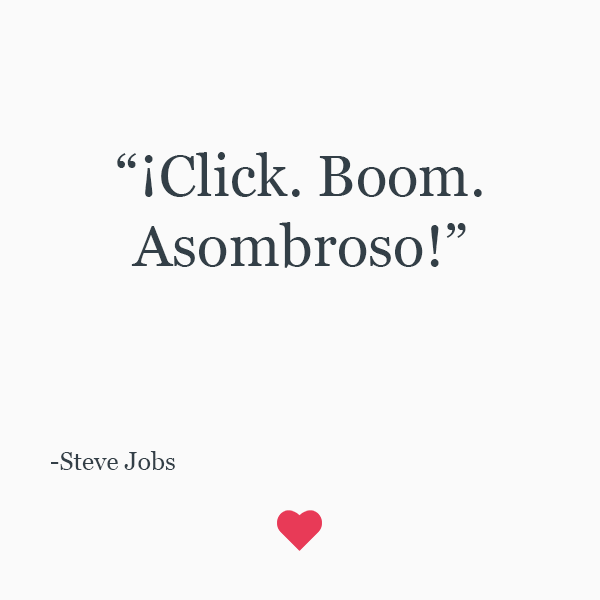
<style>
.page{position:relative;width:600px;height:600px;background:#fafafa}
.page>*{position:absolute;margin:0}
.t1{font:58.3px "Georgia";color:#333f47}
.t2{font:25px "Georgia";color:#333f47}
</style>
<div class="page">
<p class="t1" style="left:117px;top:152px;width:365px;height:116px;text-align:center">“¡Click. Boom. Asombroso!”</p>
<p class="t2" style="left:51px;top:451px;width:124px;height:19px">-Steve Jobs</p>
</div>
